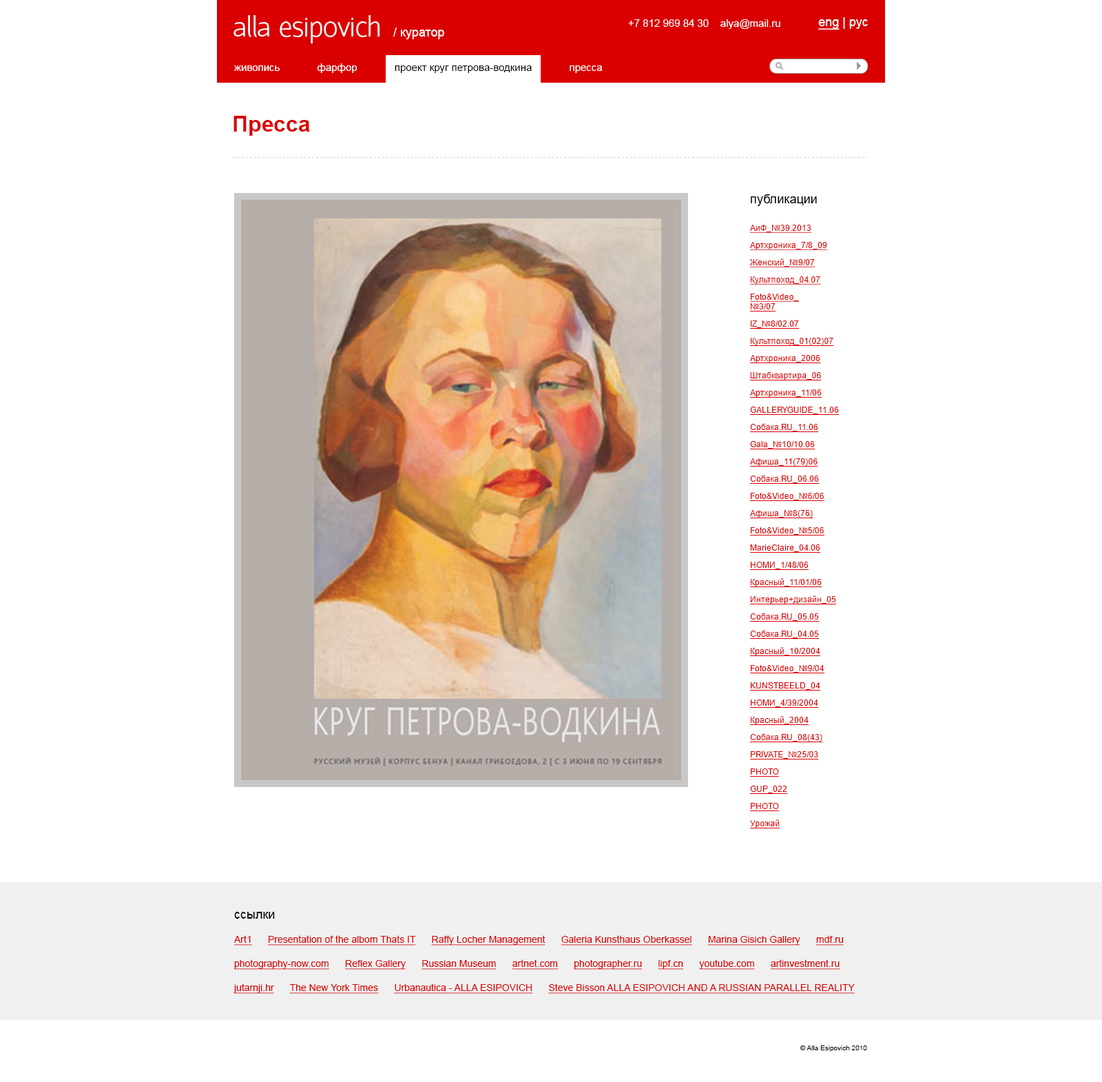
<style>
.page{position:relative;width:1102px;height:1082px;background:#ffffff}
.page>*{position:absolute;margin:0}
.t1{font:12.4px "ArialMT";color:#ffffff}
.t2{font:12.4px "ArialMT";color:#ffffff;text-decoration:underline}
.t3{font:10.3px "ArialMT";color:#ffffff}
.t4{font:10.3px "ArialMT";color:#000000}
.t5{font:22px "Arial-BoldMT";color:#da0000}
.t6{font:8.3px/17.2px "ArialMT";color:#da0000;text-decoration:underline}
.t7{font:12.4px/17.2px "ArialMT";color:#000000}
.t8{font:8.3px/27.6px "ArialMT";color:#da0000;text-decoration:underline}
.t9{font:8.3px "ArialMT";color:#da0000;text-decoration:underline}
.t10{font:9.6px/24.1px "ArialMT";color:#da0000;text-decoration:underline}
.t11{font:12.4px/24.1px "ArialMT";color:#000000}
.t12{font:6.9px "ArialMT";color:#010101}
</style>
<div class="page">
<p class="t1" style="left:819px;top:17px;width:49px;height:13px"><span class="t2">eng</span> | рус</p>
<p class="t1" style="left:393px;top:28px;width:51px;height:11px">/ куратор</p>
<p class="t3" style="left:628px;top:19px;width:153px;height:10px">+7 812 969 84 30    alya@mail.ru</p>
<p class="t3" style="left:234px;top:63px;width:368px;height:10px">живопись             фарфор            <span class="t4"> проект круг петрова-водкина   </span>          пресса</p>
<p class="t5" style="left:234px;top:116px;width:76px;height:20px">Пресса</p>
<p class="t6" style="left:750px;top:194px;width:89px;height:634px"><span class="t7">публикации<br></span><span class="t8">АиФ_№39.2013<br></span>Артхроника_7/8_09<br>Женский_№9/07<br>Культпоход_04.07<br>Foto&amp;Video_<br><span class="t9">№3/07<br></span>IZ_№8/02.07<br>Культпоход_01(02)07<br>Артхроника_2006<br>Штабквартира_06<br>Артхроника_11/06<br>GALLERYGUIDE_11.06<br>Собака.RU_11.06<br>Gala_№10/10.06<br>Афиша_11(79)06<br>Собака.RU_06.06<br>Foto&amp;Video_№6/06<br>Афиша_№8(76)<br>Foto&amp;Video_№5/06<br>MarieClaire_04.06<br>НОМИ_1/48/06<br>Красный_11/01/06<br>Интерьер+дизайн_05<br>Собака.RU_05.05<br>Собака.RU_04.05<br>Красный_10/2004<br>Foto&amp;Video_№9/04<br>KUNSTBEELD_04<br>НОМИ_4/39/2004<br>Красный_2004<br>Собака.RU_08(43)<br>PRIVATE_№25/03<br>PHOTO<br>GUP_022<br>PHOTO<br>Урожай</p>
<p class="t10" style="left:234px;top:912px;width:621px;height:82px"><span class="t11">ссылки<br></span>Art1      Presentation of the albom Thats IT      Raffy Locher Management      Galeria Kunsthaus Oberkassel      Marina Gisich Gallery      mdf.ru<br>photography-now.com      Reflex Gallery      Russian Museum      artnet.com      photographer.ru      lipf.cn      youtube.com      artinvestment.ru<br>jutarnji.hr      The New York Times      Urbanautica - ALLA ESIPOVICH      Steve Bisson ALLA ESIPOVICH AND A RUSSIAN PARALLEL REALITY</p>
<p class="t12" style="left:800px;top:1044px;width:67px;height:7px">© Alla Esipovich 2010</p>
</div>
